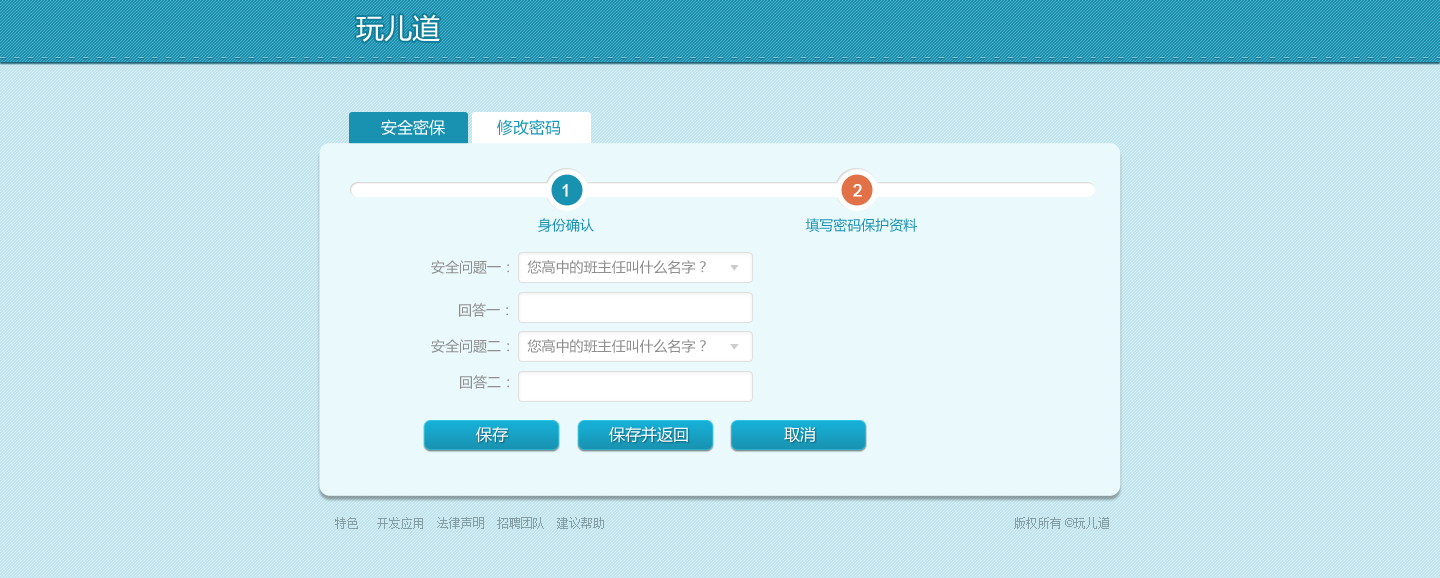
<style>
.page{position:relative;width:1440px;height:578px;background:#bfe4ed}
.page>*{position:absolute;margin:0}
.t1{font:28px "MicrosoftYaHei";color:#ffffff}
.t2{font:16px "ArialMT";color:#ffffff;font-weight:bold}
.t3{font:14px "MicrosoftYaHei";color:#1992b1}
.t4{font:14px "MicrosoftYaHei";color:#8e8e8e}
.t5{font:16px "MicrosoftYaHei";color:#ffffff}
.t6{font:12px "SimSun";color:#849fa6}
.t7{font:12px "ArialMT";color:#849fa6}
</style>
<div class="page">
<p class="t1" style="left:356px;top:14px;width:84px;height:28px">玩儿道</p>
<p class="t2" style="left:562px;top:184px;width:6px;height:13px">1</p>
<p class="t2" style="left:853px;top:184px;width:9px;height:13px">2</p>
<p class="t3" style="left:538px;top:218px;width:379px;height:14px">身份确认                                                   填写密码保护资料</p>
<p class="t4" style="left:431px;top:260px;width:275px;height:14px">安全问题一：   您高中的班主任叫什么名字？</p>
<p class="t4" style="left:459px;top:303px;width:49px;height:14px">回答一：</p>
<p class="t4" style="left:431px;top:339px;width:275px;height:14px">安全问题二：   您高中的班主任叫什么名字？</p>
<p class="t4" style="left:460px;top:375px;width:49px;height:14px">回答二：</p>
<p class="t5" style="left:476px;top:426px;width:32px;height:17px">保存</p>
<p class="t5" style="left:609px;top:426px;width:79px;height:17px">保存并返回</p>
<p class="t5" style="left:784px;top:426px;width:32px;height:17px">取消</p>
<p class="t6" style="left:335px;top:517px;width:269px;height:12px">特色   开发应用  法律声明  招聘团队  建议帮助</p>
<p class="t6" style="left:1014px;top:517px;width:95px;height:12px">版权所有<span class="t7"> ©</span>玩儿道</p>
</div>
